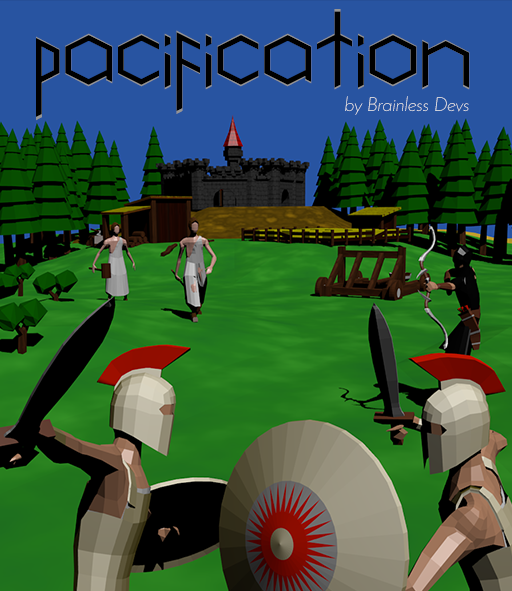
<style>
.page{position:relative;width:512px;height:591px;background:#2854a1}
.page>*{position:absolute;margin:0}
.t1{font:104.8px "Pacification";color:#000000;scale:0.95 1}
.t2{font:99.7px "Pacification";color:#000000}
.t3{font:19.4px "JosefinSans-LightItalic";color:#e8e8e8}
</style>
<div class="page">
<p class="t1" style="left:36px;top:9px;width:434px;height:112px">pacification</p>
<p class="t2" style="left:36px;top:11px;width:433px;height:106px">pacification</p>
<p class="t3" style="left:345px;top:96px;width:124px;height:19px">by Brainless Devs</p>
</div>
